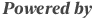
<style>
.page{position:relative;width:94px;height:20px;background:#ffffff}
.page>*{position:absolute;margin:0}
.t1{font:17px "NewYorkLarge-BoldItalic";color:#444444}
</style>
<div class="page">
<p class="t1" style="left:2px;top:1px;width:90px;height:17px">Powered by</p>
</div>
